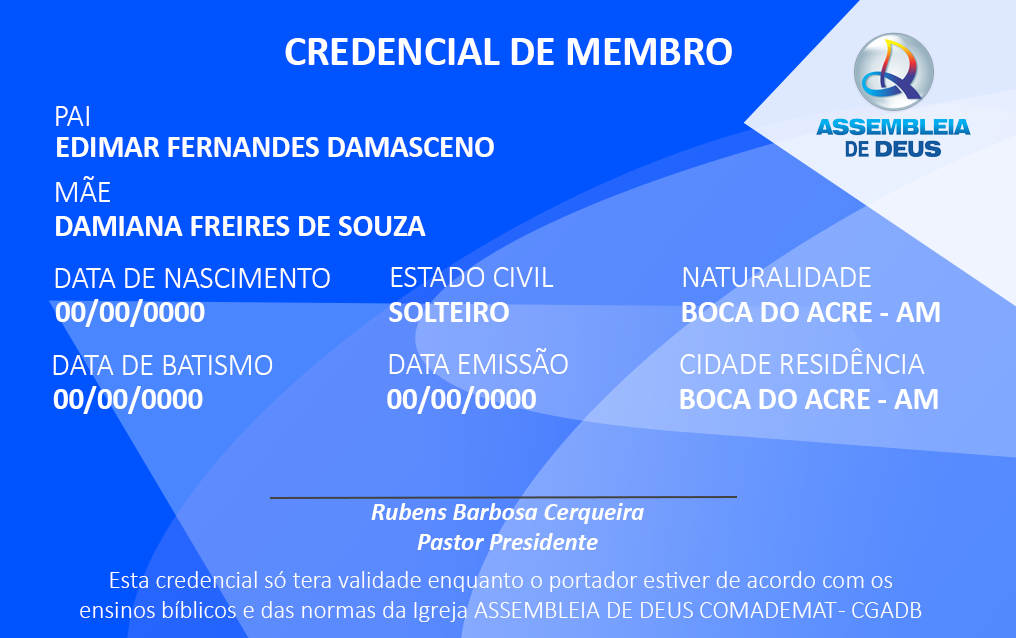
<style>
.page{position:relative;width:1016px;height:638px;background:#0054ff}
.page>*{position:absolute;margin:0}
.t1{font:41.7px "Calibri-Bold";color:#ffffff}
.t2{font:30.5px "Calibri-Light";color:#ffffff}
.t3{font:30.5px "Calibri-Bold";color:#ffffff}
.t4{font:25px "Calibri-BoldItalic";color:#ffffff}
.t5{font:25px "Calibri-Light";color:#ffffff}
</style>
<div class="page">
<p class="t1" style="left:285px;top:38px;width:447px;height:27px">CREDENCIAL DE MEMBRO</p>
<p class="t2" style="left:56px;top:106px;width:33px;height:20px">PAI</p>
<p class="t3" style="left:57px;top:137px;width:437px;height:20px">EDIMAR FERNANDES DAMASCENO</p>
<p class="t2" style="left:56px;top:176px;width:54px;height:26px">MÃE</p>
<p class="t3" style="left:56px;top:216px;width:370px;height:20px">DAMIANA FREIRES DE SOUZA</p>
<p class="t2" style="left:55px;top:268px;width:275px;height:20px">DATA DE NASCIMENTO</p>
<p class="t2" style="left:391px;top:267px;width:163px;height:20px">ESTADO CIVIL</p>
<p class="t2" style="left:683px;top:267px;width:188px;height:20px">NATURALIDADE</p>
<p class="t3" style="left:55px;top:299px;width:150px;height:28px">00/00/0000</p>
<p class="t3" style="left:389px;top:302px;width:120px;height:20px">SOLTEIRO</p>
<p class="t3" style="left:682px;top:302px;width:258px;height:20px">BOCA DO ACRE - AM</p>
<p class="t2" style="left:389px;top:348px;width:179px;height:26px">DATA EMISSÃO</p>
<p class="t2" style="left:680px;top:348px;width:245px;height:26px">CIDADE RESIDÊNCIA</p>
<p class="t2" style="left:53px;top:355px;width:220px;height:20px">DATA DE BATISMO</p>
<p class="t3" style="left:53px;top:386px;width:150px;height:28px">00/00/0000</p>
<p class="t3" style="left:387px;top:386px;width:149px;height:28px">00/00/0000</p>
<p class="t3" style="left:680px;top:389px;width:258px;height:20px">BOCA DO ACRE - AM</p>
<p class="t4" style="left:371px;top:503px;width:273px;height:47px;text-align:center">Rubens Barbosa Cerqueira<br>Pastor Presidente</p>
<p class="t5" style="left:80px;top:571px;width:842px;height:51px;text-align:center">Esta credencial só tera validade enquanto o portador estiver de acordo com os <br>ensinos bíblicos e das normas da Igreja ASSEMBLEIA DE DEUS COMADEMAT - CGADB</p>
</div>
